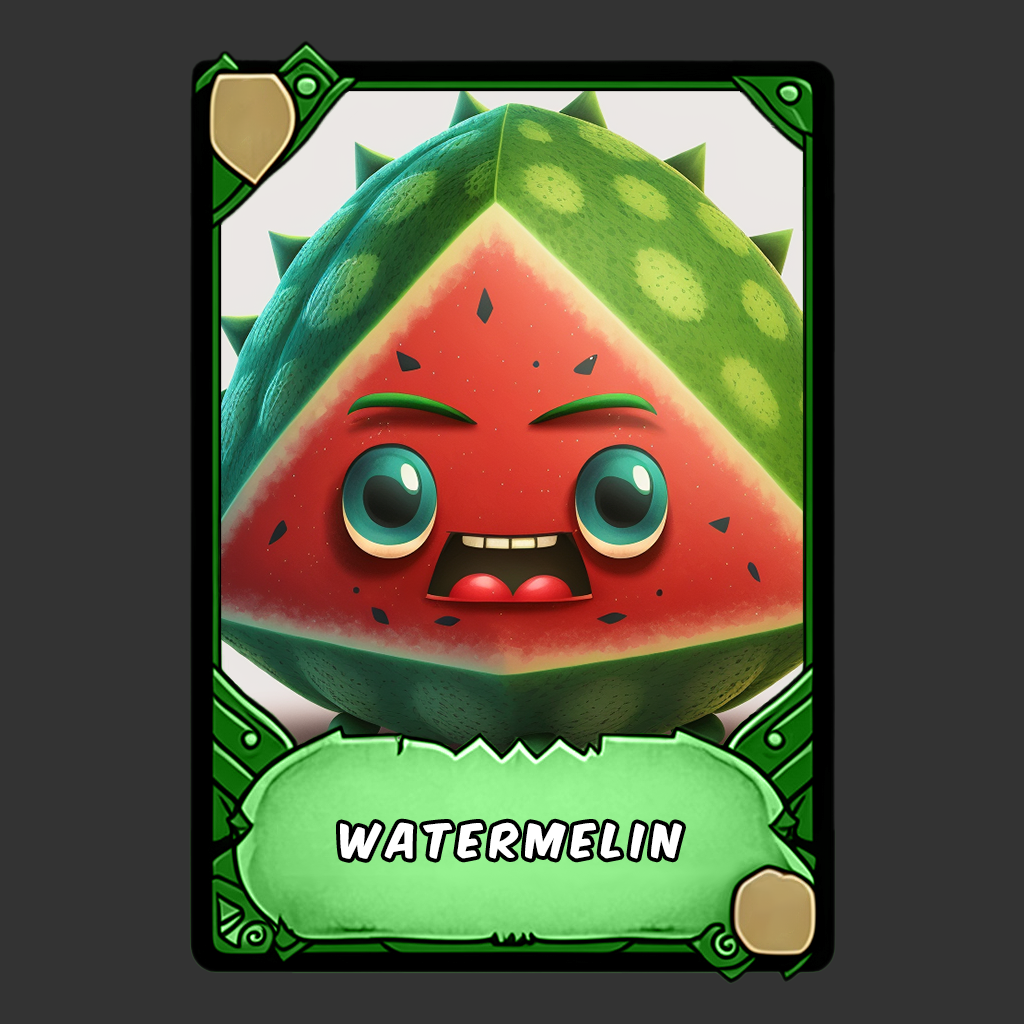
<style>
.page{position:relative;width:1024px;height:1024px;background:#333333}
.page>*{position:absolute;margin:0}
.t1{font:40px "KomikaAxis";letter-spacing:0.2em;color:#ffffff}
</style>
<div class="page">
<p class="t1" style="left:340px;top:822px;width:342px;height:37px">watermelin</p>
</div>
